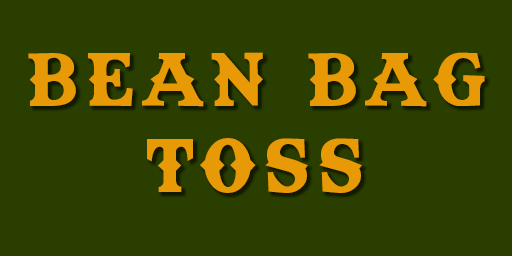
<style>
.page{position:relative;width:512px;height:256px;background:#2a3e00}
.page>*{position:absolute;margin:0}
.t1{font:72px "TexasTangoBOLDPERSONALUSE";letter-spacing:0.1em;color:#e79a05}
</style>
<div class="page">
<p class="t1" style="left:28px;top:52px;width:457px;height:141px;text-align:center">BEAN BAG<br>TOSS</p>
</div>
